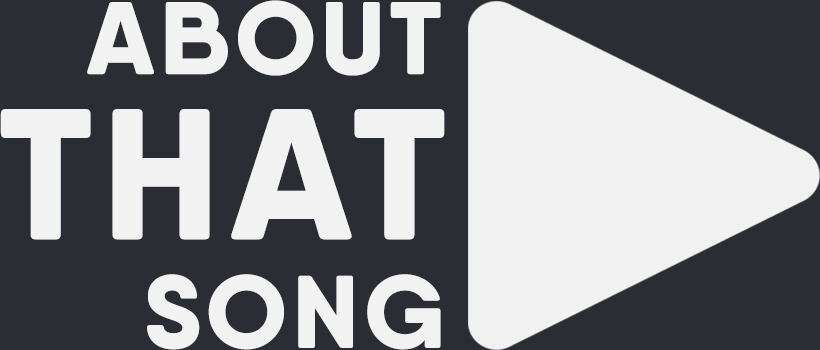
<style>
.page{position:relative;width:820px;height:350px;background:#2a2d34}
.page>*{position:absolute;margin:0}
.t1{font:102.9px "QanelasSoftDEMO-ExtraBold";letter-spacing:0.05em;color:#f2f2f2}
.t2{font:185.8px "QanelasSoftDEMO-ExtraBold";letter-spacing:0.05em;color:#f2f2f2}
</style>
<div class="page">
<p class="t1" style="left:87px;top:0px;width:354px;height:76px">ABOUT</p>
<p class="t2" style="left:0px;top:109px;width:445px;height:131px">THAT</p>
<p class="t1" style="left:147px;top:274px;width:294px;height:76px">SONG</p>
</div>
